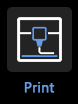
<style>
.page{position:relative;width:78px;height:104px;background:#000000}
.page>*{position:absolute;margin:0}
.t1{font:14px "SegoeUI";color:#669ce5;font-weight:bold}
</style>
<div class="page">
<p class="t1" style="left:24px;top:82px;width:31px;height:11px">Print</p>
</div>
